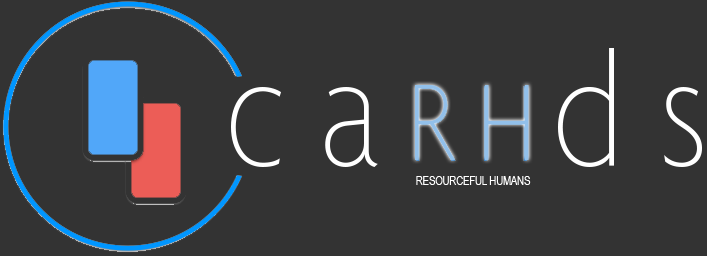
<style>
.page{position:relative;width:707px;height:256px;background:#333333}
.page>*{position:absolute;margin:0}
.t1{font:172px "Agenda-ThinCondensed";color:#ffffff}
.t2{font:118px "Agenda-ThinCondensed";color:#92c0ea}
.t3{font:11.5px "ArialNarrow";color:#ffffff}
</style>
<div class="page">
<p class="t1" style="left:231px;top:48px;width:471px;height:119px">c a     d s</p>
<p class="t2" style="left:415px;top:85px;width:114px;height:75px">R H</p>
<p class="t3" style="left:416px;top:176px;width:115px;height:9px">RESOURCEFUL HUMANS</p>
</div>
